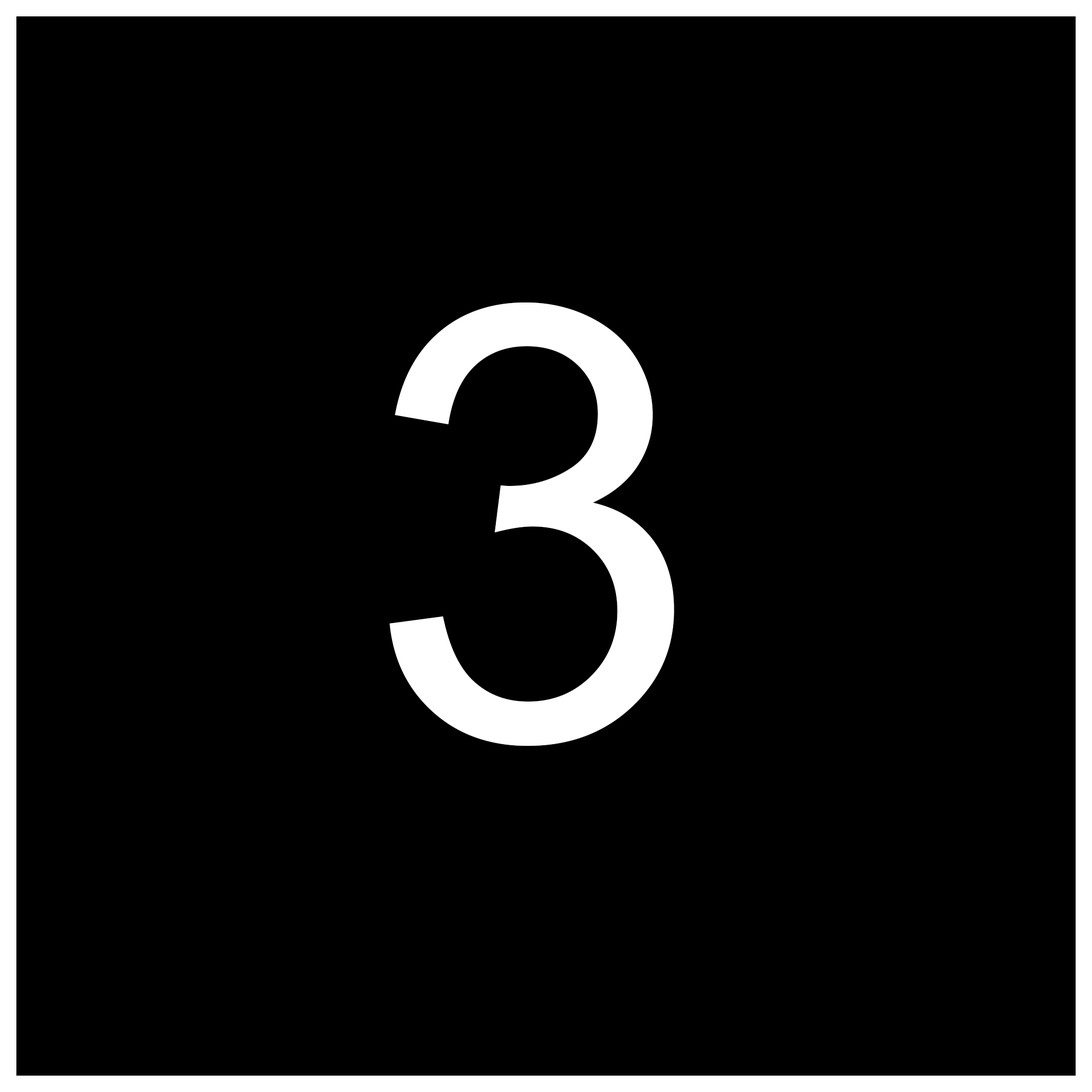
<style>
.page{position:relative;width:1092px;height:1092px;background:#000000}
.page>*{position:absolute;margin:0}
.t1{font:606.7px "ArialMT";color:#ffffff}
</style>
<div class="page">
<p class="t1" style="left:389px;top:302px;width:285px;height:444px">3</p>
</div>
